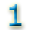
<style>
.page{position:relative;width:30px;height:30px;background:#ffffff}
.page>*{position:absolute;margin:0}
.t1{font:30px "Verdana"}
</style>
<div class="page">
<p class="t1" style="left:9px;top:4px;width:13px;height:22px">1</p>
</div>
